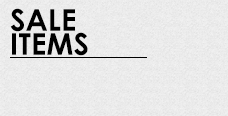
<style>
.page{position:relative;width:228px;height:116px}
.page>*{position:absolute;margin:0}
.t1{font:30px/24px "CenturyGothic-Bold";color:#000000}
</style>
<div class="page">
<p class="t1" style="left:10px;top:8px;width:78px;height:48px">SALE<br>ITEMS</p>
</div>
